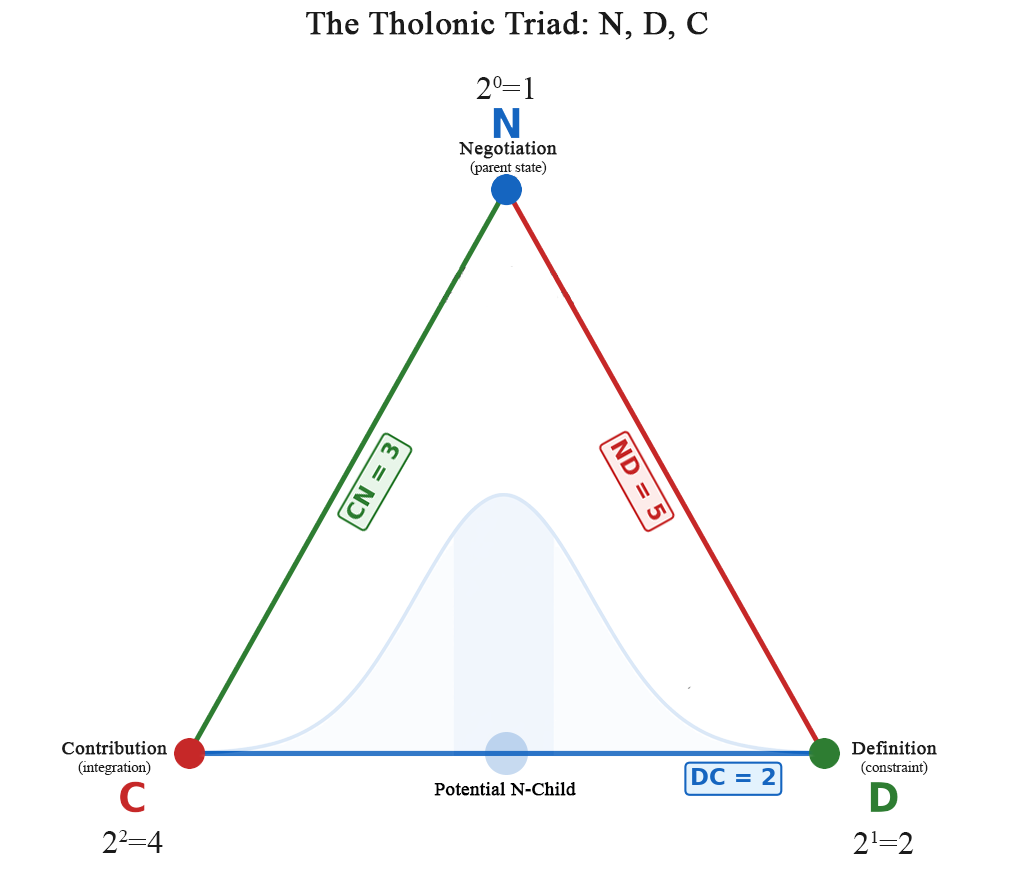
<style>
.page{position:relative;width:1012px;height:875px;background:#ffffff}
.page>*{position:absolute;margin:0}
.t1{font:33.3px "TimesNewRomanPSMT";color:#1b1b1b;font-weight:bold}
.t2{font:33.3px "TimesNewRomanPSMT";color:#1b1b1b}
.t3{font:25px/14.6px "TimesNewRomanPSMT";color:#1b1b1b}
.t4{font:33.3px/14.6px "TimesNewRomanPSMT";color:#1b1b1b;font-weight:bold}
.t5{font:18.8px "TimesNewRomanPSMT";color:#000001;font-weight:bold}
</style>
<div class="page">
<p class="t1" style="left:306px;top:11px;width:402px;height:29px">The Tholonic Triad: N, D, C</p>
<p class="t2" style="left:476px;top:76px;width:58px;height:23px">20=1</p>
<p class="t3" style="left:459px;top:141px;width:98px;height:34px;text-align:center"><span class="t4">Negotiation<br></span>(parent state)</p>
<p class="t3" style="left:62px;top:741px;width:105px;height:34px;text-align:center"><span class="t4">Contribution<br></span>(integration)</p>
<p class="t3" style="left:852px;top:741px;width:85px;height:34px;text-align:center"><span class="t4">Definition<br></span>(constraint)</p>
<p class="t5" style="left:434px;top:782px;width:142px;height:14px">Potential N-Child</p>
<p class="t2" style="left:102px;top:830px;width:61px;height:23px">22=4</p>
<p class="t2" style="left:853px;top:831px;width:61px;height:23px">21=2</p>
</div>
